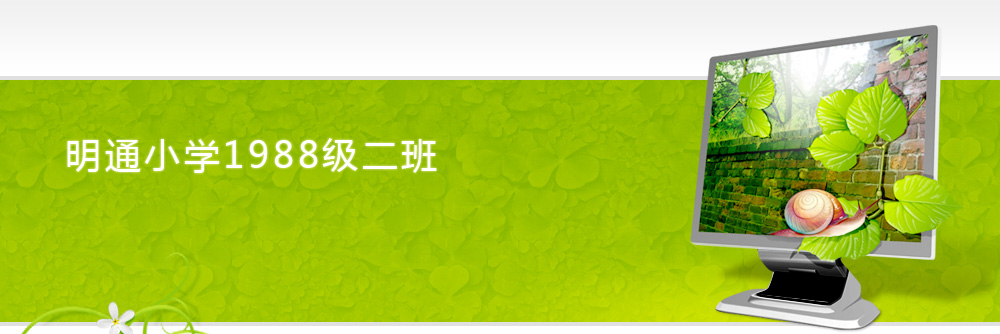
<style>
.page{position:relative;width:1000px;height:334px}
.page>*{position:absolute;margin:0}
.t1{font:36px "MicrosoftYaHei";letter-spacing:0.1em;color:#ffffff}
</style>
<div class="page">
<p class="t1" style="left:67px;top:138px;width:370px;height:35px">明通小学1988级二班</p>
</div>
